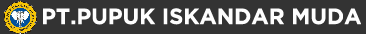
<style>
.page{position:relative;width:366px;height:34px;background:#333333}
.page>*{position:absolute;margin:0}
.t1{font:22px "GothamBold";color:#fefefe}
</style>
<div class="page">
<p class="t1" style="left:43px;top:8px;width:318px;height:17px">PT.PUPUK ISKANDAR MUDA</p>
</div>
